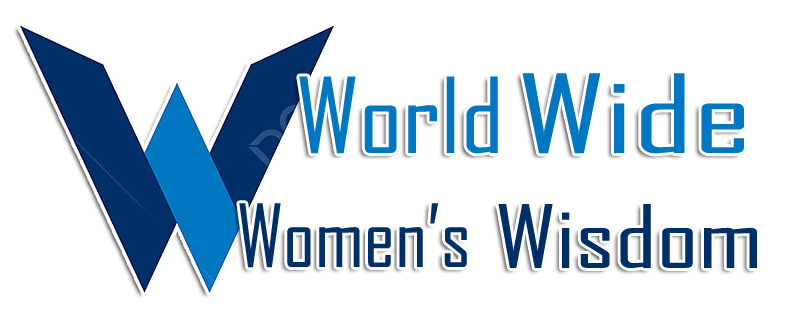
<style>
.page{position:relative;width:798px;height:322px;background:#ffffff}
.page>*{position:absolute;margin:0}
.t1{font:99.9px "AgencyFB-Reg";color:#0177c1;scale:1.15 1}
.t2{font:104.1px "AgencyFB-Reg";color:#0177c1;scale:1.52 1}
.t3{font:83.3px "AgencyFB-Reg";color:#002f67}
.t4{font:83.3px "AgencyFB-Reg";color:#002f67;scale:1.32 1}
</style>
<div class="page">
<p class="t1" style="left:299px;top:76px;width:199px;height:78px">World</p>
<p class="t2" style="left:522px;top:73px;width:222px;height:81px">Wide</p>
<p class="t3" style="left:239px;top:203px;width:228px;height:65px">Women’s</p>
<p class="t4" style="left:498px;top:204px;width:259px;height:64px">Wisdom</p>
</div>
